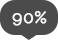
<style>
.page{position:relative;width:58px;height:40px;background:#4c4b4c}
.page>*{position:absolute;margin:0}
.t1{font:30px "Raleway-Regular";letter-spacing:0.01em;color:#f9f9f9;font-weight:bold}
</style>
<div class="page">
<p class="t1" style="left:12px;top:11px;width:35px;height:15px">90%</p>
</div>
